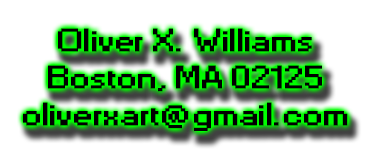
<style>
.page{position:relative;width:368px;height:154px;background:#ffffff}
.page>*{position:absolute;margin:0}
.t1{font:30px "Small Fonts";letter-spacing:0.025em;color:#000000;font-weight:bold;scale:1.33 1}
.t2{font:36px "Small Fonts";letter-spacing:0.025em;color:#000000;font-weight:bold;scale:1.33 1}
</style>
<div class="page">
<p class="t1" style="left:23px;top:28px;width:325px;height:103px;text-align:center"><span class="t2"><br><br></span>Oliver X. Williams<br>Boston, MA 02125<br>oliverxart@gmail.com</p>
</div>
